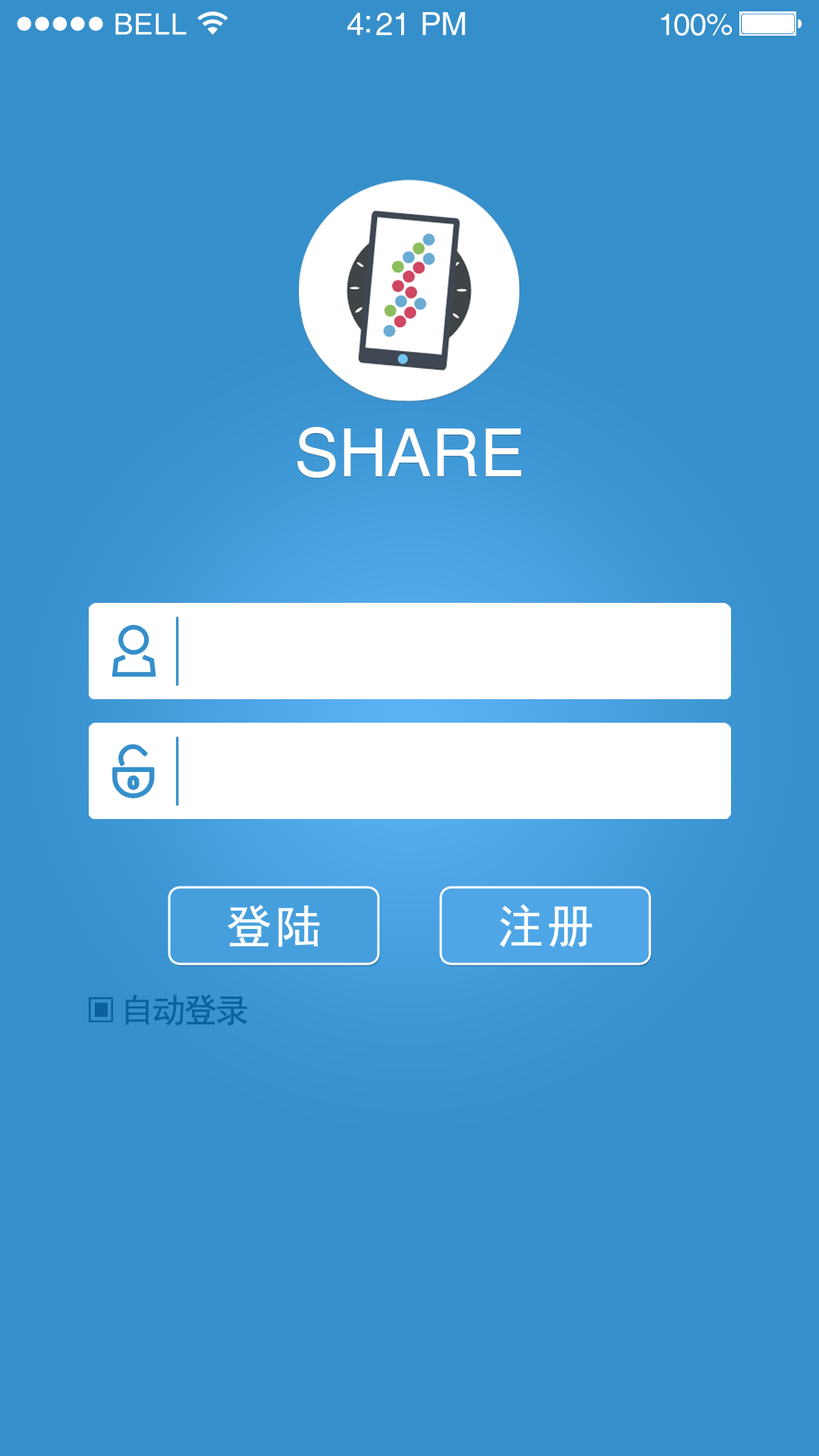
<style>
.page{position:relative;width:819px;height:1456px;background:#358fcb}
.page>*{position:absolute;margin:0}
.t1{font:29.3px "Helvetica";letter-spacing:0.02em;color:#ffffff}
.t2{font:31.8px "Helvetica";letter-spacing:-0.02em;color:#ffffff}
.t3{font:30.6px "Helvetica";letter-spacing:-0.02em;color:#ffffff}
.t4{font:66.7px "Helvetica";color:#ffffff}
.t5{font:46.3px "SimHei";letter-spacing:0.075em;color:#ffffff}
.t6{font:33.3px "SimHei";letter-spacing:-0.05em;color:#0a619e}
</style>
<div class="page">
<p class="t1" style="left:115px;top:13px;width:72px;height:22px">BELL</p>
<p class="t2" style="left:347px;top:12px;width:119px;height:24px">4:21 PM</p>
<p class="t3" style="left:661px;top:14px;width:72px;height:22px">100%</p>
<p class="t4" style="left:297px;top:427px;width:225px;height:51px">SHARE</p>
<p class="t5" style="left:227px;top:905px;width:93px;height:42px">登陆</p>
<p class="t5" style="left:500px;top:904px;width:92px;height:44px">注册</p>
<p class="t6" style="left:125px;top:994px;width:122px;height:32px">自动登录</p>
</div>
